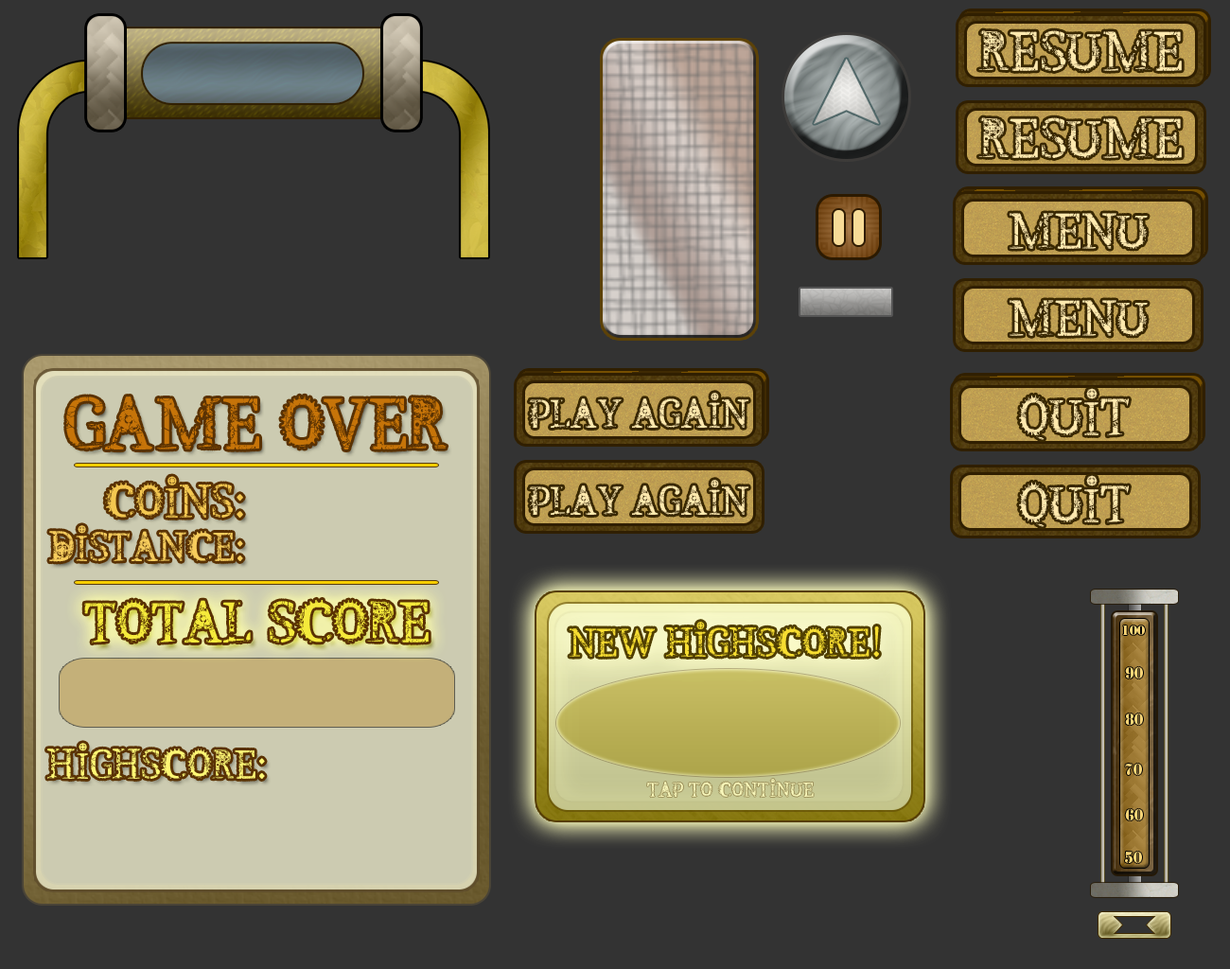
<style>
.page{position:relative;width:1230px;height:969px;background:#333333}
.page>*{position:absolute;margin:0}
.t1{font:59.6px "SteampunkbyMartavanEck";color:#ffe9ae}
.t2{font:53.9px "SteampunkbyMartavanEck";color:#ffe9ae}
.t3{font:56.8px "SteampunkbyMartavanEck";color:#ffe9ae}
.t4{font:77.6px "SteampunkbyMartavanEck";color:#c67409}
.t5{font:42.6px "SteampunkbyMartavanEck";color:#ffe9ae}
.t6{font:50.2px "SteampunkbyMartavanEck";color:#f4c750}
.t7{font:43.5px "SteampunkbyMartavanEck";color:#f6cc5c}
.t8{font:61.5px "SteampunkbyMartavanEck";color:#f5ea3b}
.t9{font:42.6px "SteampunkbyMartavanEck";color:#f7dd31}
.t10{font:12.3px "StencilStd";color:#f8d577}
.t11{font:14.2px "StencilStd";color:#f8d577}
.t12{font:43.5px "SteampunkbyMartavanEck";color:#fff774}
.t13{font:21.8px "SteampunkbyMartavanEck";color:#f9f8bb}
</style>
<div class="page">
<p class="t1" style="left:979px;top:30px;width:203px;height:41px">RESUME</p>
<p class="t1" style="left:979px;top:117px;width:203px;height:41px">RESUME</p>
<p class="t2" style="left:1010px;top:213px;width:138px;height:36px">MENU</p>
<p class="t2" style="left:1010px;top:300px;width:138px;height:36px">MENU</p>
<p class="t3" style="left:1019px;top:388px;width:110px;height:52px">QUIT</p>
<p class="t4" style="left:66px;top:396px;width:381px;height:54px">GAME OVER</p>
<p class="t5" style="left:529px;top:393px;width:220px;height:35px">PLAY AGAIN</p>
<p class="t6" style="left:105px;top:476px;width:138px;height:43px">COINS:</p>
<p class="t5" style="left:529px;top:480px;width:220px;height:35px">PLAY AGAIN</p>
<p class="t3" style="left:1019px;top:475px;width:110px;height:52px">QUIT</p>
<p class="t7" style="left:49px;top:525px;width:194px;height:37px">DISTANCE:</p>
<p class="t8" style="left:84px;top:599px;width:345px;height:45px">TOTAL SCORE</p>
<p class="t9" style="left:570px;top:622px;width:309px;height:35px">NEW HIGHSCORE!</p>
<p class="t10" style="left:1123px;top:626px;width:22px;height:9px">100</p>
<p class="t11" style="left:1125px;top:667px;width:18px;height:12px">90</p>
<p class="t11" style="left:1125px;top:714px;width:18px;height:11px">80</p>
<p class="t12" style="left:47px;top:743px;width:218px;height:36px">HIGHSCORE:</p>
<p class="t11" style="left:1125px;top:764px;width:17px;height:11px">70</p>
<p class="t13" style="left:647px;top:779px;width:167px;height:19px">TAP TO CONTINUE</p>
<p class="t11" style="left:1125px;top:809px;width:18px;height:12px">60</p>
<p class="t11" style="left:1125px;top:852px;width:17px;height:11px">50</p>
</div>
